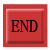
<style>
.page{position:relative;width:50px;height:50px;background:#cc3333}
.page>*{position:absolute;margin:0}
.t1{font:18px "SimSun";color:#000000}
</style>
<div class="page">
<p class="t1" style="left:11px;top:20px;width:27px;height:12px">END</p>
</div>
